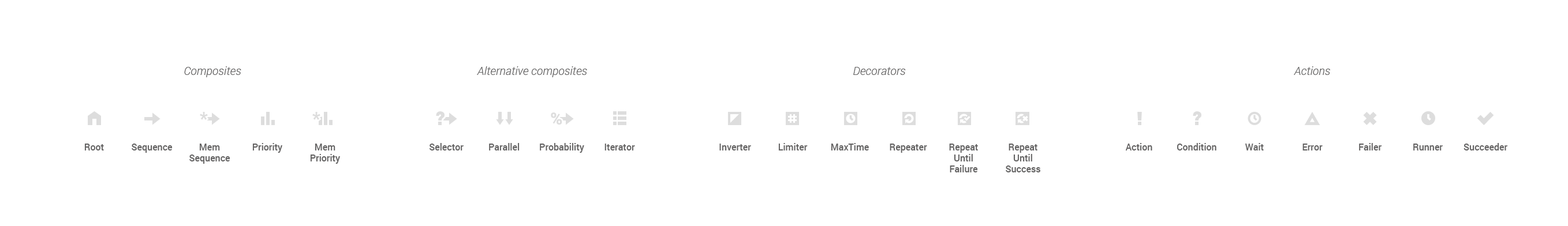
<style>
.page{position:relative;width:1568px;height:226px;background:#ffffff}
.page>*{position:absolute;margin:0}
.t1{font:11.5px "Roboto-LightItalic";color:#646363}
.t2{font:9.2px "Roboto-Medium";color:#646363}
</style>
<div class="page">
<p class="t1" style="left:184px;top:66px;width:57px;height:11px">Composites</p>
<p class="t1" style="left:477px;top:66px;width:110px;height:11px">Alternative composites</p>
<p class="t1" style="left:853px;top:67px;width:53px;height:8px">Decorators</p>
<p class="t1" style="left:1294px;top:66px;width:36px;height:9px">Actions</p>
<p class="t2" style="left:84px;top:144px;width:20px;height:7px">Root</p>
<p class="t2" style="left:132px;top:144px;width:41px;height:9px">Sequence</p>
<p class="t2" style="left:189px;top:144px;width:41px;height:20px;text-align:center">Mem<br>Sequence</p>
<p class="t2" style="left:252px;top:143px;width:30px;height:10px">Priority</p>
<p class="t2" style="left:310px;top:144px;width:30px;height:20px;text-align:center">Mem<br>Priority</p>
<p class="t2" style="left:430px;top:143px;width:34px;height:8px">Selector</p>
<p class="t2" style="left:489px;top:143px;width:31px;height:8px">Parallel</p>
<p class="t2" style="left:540px;top:143px;width:44px;height:10px">Probability</p>
<p class="t2" style="left:604px;top:144px;width:31px;height:7px">Iterator</p>
<p class="t2" style="left:719px;top:144px;width:32px;height:7px">Inverter</p>
<p class="t2" style="left:778px;top:143px;width:30px;height:8px">Limiter</p>
<p class="t2" style="left:831px;top:143px;width:38px;height:8px">MaxTime</p>
<p class="t2" style="left:890px;top:144px;width:37px;height:9px">Repeater</p>
<p class="t2" style="left:949px;top:144px;width:29px;height:29px;text-align:center">Repeat<br>Until<br>Failure</p>
<p class="t2" style="left:1006px;top:144px;width:34px;height:29px;text-align:center">Repeat<br>Until<br>Success</p>
<p class="t2" style="left:1125px;top:143px;width:27px;height:8px">Action</p>
<p class="t2" style="left:1177px;top:143px;width:39px;height:8px">Condition</p>
<p class="t2" style="left:1245px;top:143px;width:19px;height:8px">Wait</p>
<p class="t2" style="left:1302px;top:144px;width:21px;height:7px">Error</p>
<p class="t2" style="left:1359px;top:143px;width:23px;height:8px">Failer</p>
<p class="t2" style="left:1413px;top:144px;width:30px;height:7px">Runner</p>
<p class="t2" style="left:1464px;top:143px;width:43px;height:8px">Succeeder</p>
</div>
